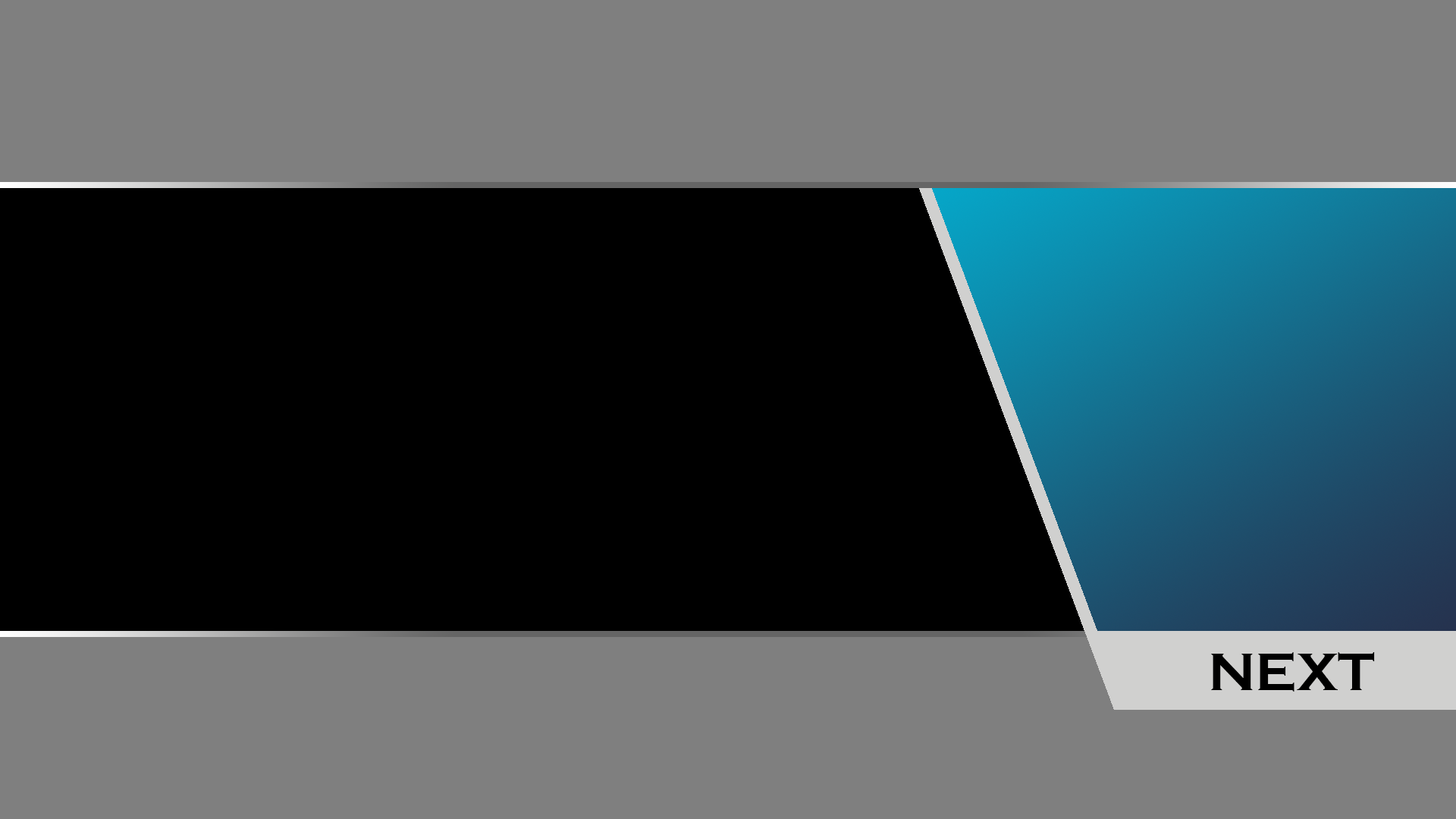
<style>
.page{position:relative;width:1456px;height:819px;background:#7f7f7f}
.page>*{position:absolute;margin:0}
.t1{font:54.6px "CopperplateGothic-Bold";color:#000000}
</style>
<div class="page">
<p class="t1" style="left:1211px;top:652px;width:164px;height:40px">NEXT</p>
</div>
